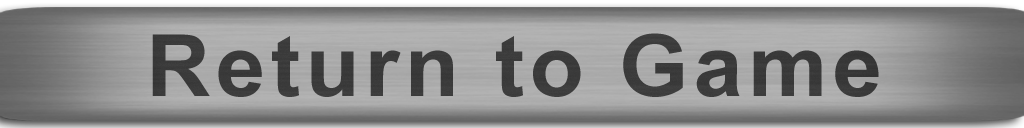
<style>
.page{position:relative;width:1024px;height:128px}
.page>*{position:absolute;margin:0}
.t1{font:85.8px "Arial-BoldMT";letter-spacing:0.06em;color:#3a3a3a;scale:1.04 1}
</style>
<div class="page">
<p class="t1" style="left:152px;top:33px;width:727px;height:64px">Return to Game</p>
</div>
